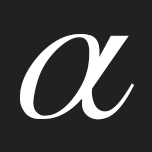
<style>
.page{position:relative;width:152px;height:152px;background:#212121}
.page>*{position:absolute;margin:0}
.t1{font:234.6px "SnellRoundhand";color:#ffffff}
</style>
<div class="page">
<p class="t1" style="left:19px;top:34px;width:115px;height:86px">ɑ</p>
</div>
